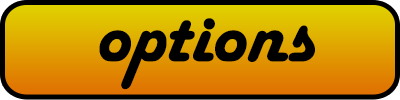
<style>
.page{position:relative;width:400px;height:100px;background:#000000}
.page>*{position:absolute;margin:0}
.t1{font:81.3px "HarlowSolid";color:#000000}
</style>
<div class="page">
<p class="t1" style="left:99px;top:18px;width:216px;height:72px">options</p>
</div>
